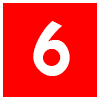
<style>
.page{position:relative;width:100px;height:100px;background:#ff0000}
.page>*{position:absolute;margin:0}
.t1{font:72px "ELEGANCE";color:#ffffff}
</style>
<div class="page">
<p class="t1" style="left:33px;top:21px;width:37px;height:55px">6</p>
</div>
